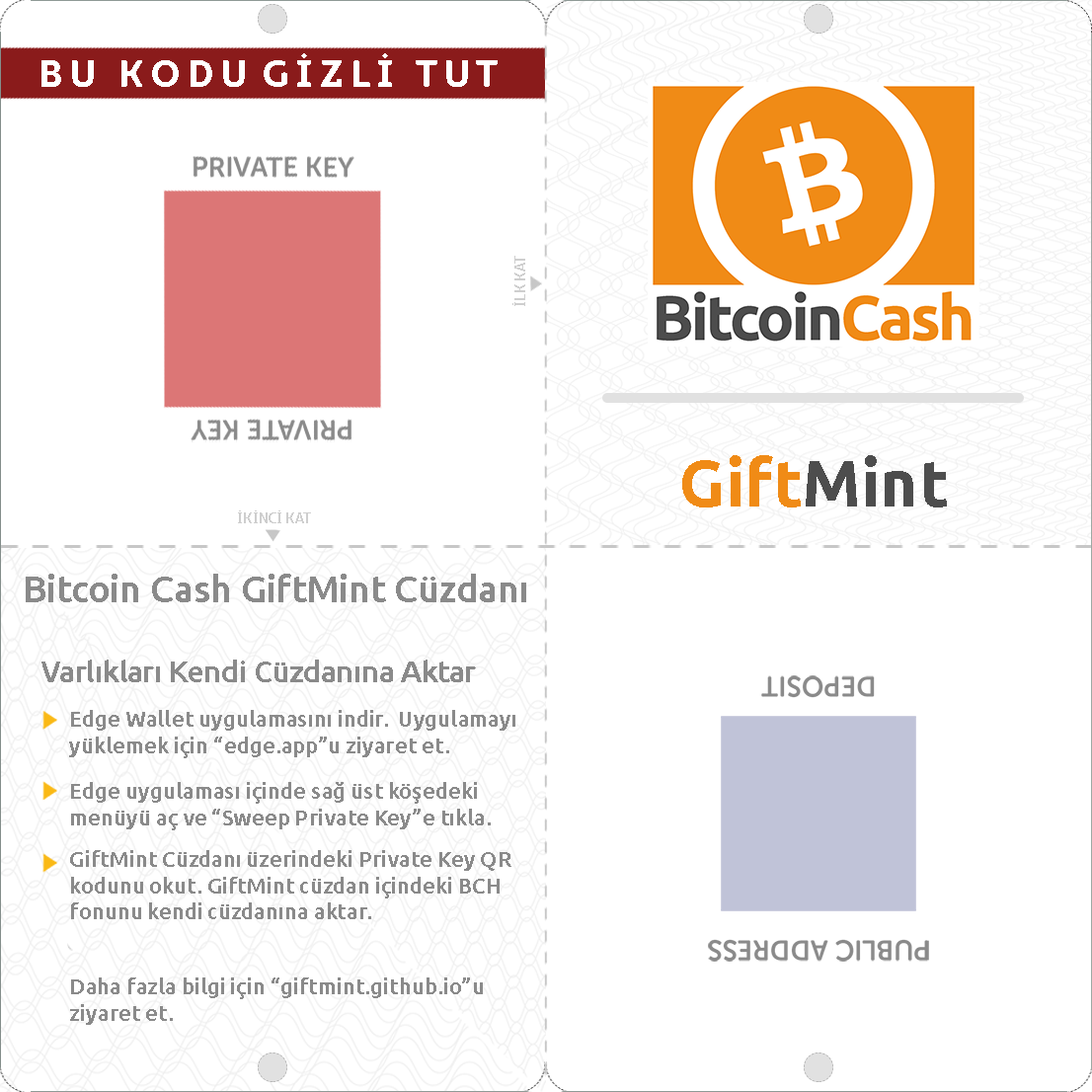
<style>
.page{position:relative;width:1092px;height:1092px;background:#ffffff}
.page>*{position:absolute;margin:0}
.t1{font:37px "MarlonPro-UltraBold";color:#ffffff}
.t2{font:14.4px "MarlonPro-Bold";color:#cecece}
.t3{font:65.8px "Ubuntu-Bold";color:#f08b16}
.t4{font:65.8px "Ubuntu-Bold";color:#4d4d4d}
.t5{font:37px "Ubuntu-Medium";color:#8a8a8a}
.t6{font:29.2px "Ubuntu-Medium";color:#8a8a8a}
.t7{font:21.9px "Ubuntu-Medium";color:#8a8a8a}
</style>
<div class="page">
<p class="t1" style="left:41px;top:53px;width:457px;height:34px">B U   K O D U  G İ Z L İ   T U T</p>
<p class="t2" style="left:512px;top:256px;width:13px;height:50px;rotate:-90deg">İLK KAT</p>
<p class="t3" style="left:682px;top:455px;width:265px;height:52px">Gift<span class="t4">Mint</span></p>
<p class="t2" style="left:238px;top:510px;width:73px;height:13px">İKİNCİ KAT</p>
<p class="t5" style="left:26px;top:574px;width:500px;height:28px">Bitcoin Cash GiftMint Cüzdanı</p>
<p class="t6" style="left:41px;top:660px;width:435px;height:22px">Varlıkları Kendi Cüzdanına Aktar</p>
<p class="t7" style="left:69px;top:710px;width:446px;height:48px">Edge Wallet uygulamasını indir.  Uygulamayı yüklemek için “edge.app”u ziyaret et.</p>
<p class="t7" style="left:71px;top:782px;width:420px;height:48px">Edge uygulaması içinde sağ üst köşedeki menüyü aç ve “Sweep Private Key”e tıkla. BCH’yi seç.</p>
<p class="t7" style="left:70px;top:850px;width:441px;height:69px">GiftMint Cüzdanı üzerindeki Private Key QR kodunu okut. GiftMint cüzdan içindeki BCH fonunu kendi cüzdanına aktar.</p>
<p class="t7" style="left:70px;top:977px;width:413px;height:48px">Daha fazla bilgi için “giftmint.github.io”u ziyaret et.</p>
</div>
